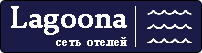
<style>
.page{position:relative;width:202px;height:53px;background:#1b1b48}
.page>*{position:absolute;margin:0}
.t1{font:30px "Constantia";letter-spacing:-0.005em;color:#ffffff;font-weight:bold}
.t2{font:30px "Constantia";letter-spacing:0.025em;color:#ffffff;font-weight:bold}
.t3{font:12px "TimesNewRomanPSMT";letter-spacing:0.025em;color:#ffffff;font-weight:bold}
</style>
<div class="page">
<p class="t1" style="left:11px;top:6px;width:116px;height:29px"><span class="t2">Lag</span>oona</p>
<p class="t3" style="left:56px;top:37px;width:71px;height:9px">сеть отелей</p>
</div>
